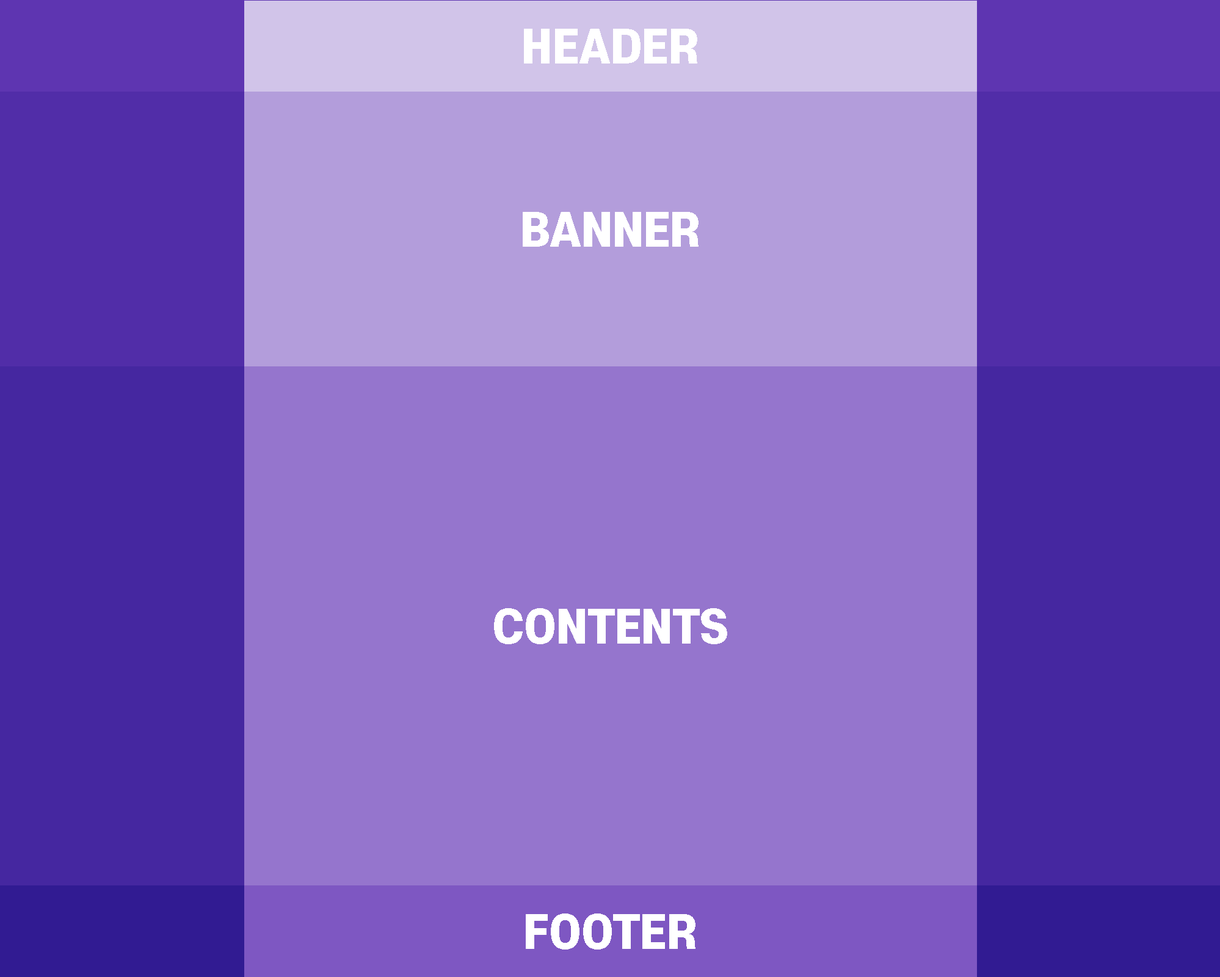
<style>
.page{position:relative;width:1220px;height:977px;background:#9575cd}
.page>*{position:absolute;margin:0}
.t1{font:44px "S-CoreDream-8Heavy";color:#ffffff}
</style>
<div class="page">
<p class="t1" style="left:524px;top:29px;width:173px;height:35px">HEADER</p>
<p class="t1" style="left:523px;top:212px;width:176px;height:35px">BANNER</p>
<p class="t1" style="left:494px;top:608px;width:233px;height:36px">CONTENTS</p>
<p class="t1" style="left:526px;top:914px;width:170px;height:36px">FOOTER</p>
</div>
